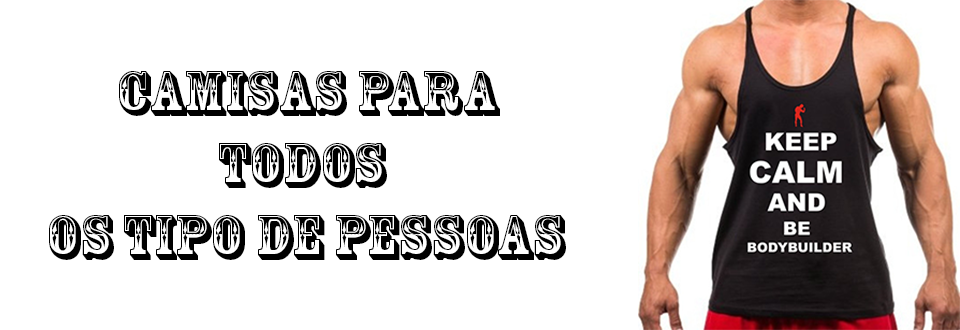
<style>
.page{position:relative;width:960px;height:330px;background:#ffffff}
.page>*{position:absolute;margin:0}
.t1{font:60px "RosewoodStd-Regular";color:#000000}
</style>
<div class="page">
<p class="t1" style="left:49px;top:71px;width:517px;height:189px;text-align:center">CAMISAS PARA <br>TODOS<br> OS TIPO DE PESSOAS</p>
</div>
